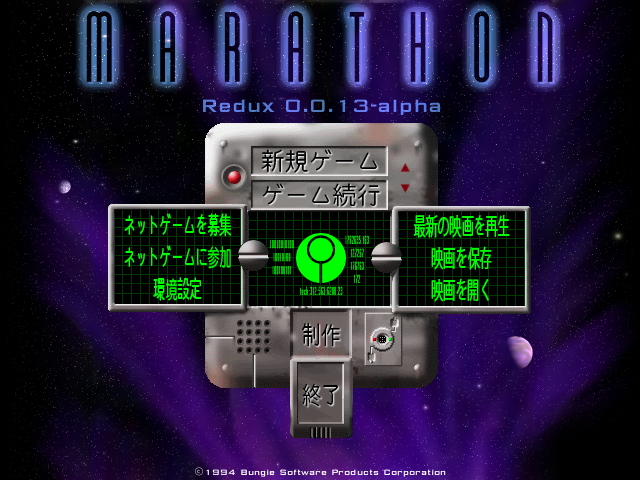
<style>
.page{position:relative;width:640px;height:480px}
.page>*{position:absolute;margin:0}
.t1{font:24px/34px "KikaiChokokuJIS-Md";color:#000000}
.t2{font:24px/34px "KozGoPr6N-Regular";color:#000000}
.t3{font:24px/32px "KikaiChokokuJIS-Md";color:#00ff00;scale:0.5 1}
.t4{font:24px/32px "KozGoPr6N-Regular";color:#00ff00;scale:0.5 1}
.t5{font:24px/32px "HGMaruGothicMPRO";color:#00ff00;scale:0.5 1}
.t6{font:24px "KikaiChokokuJIS-Md";color:#000000;scale:0.8 1}
.t7{font:24px "KozGoPr6N-Regular";color:#000000;scale:0.8 1}
</style>
<div class="page">
<p class="t1" style="left:261px;top:149px;width:119px;height:58px;text-align:center">新規ゲーム<br>ゲーム<span class="t2">続</span>行</p>
<p class="t3" style="left:124px;top:213px;width:108px;height:88px;text-align:center">ネットゲームを募<span class="t4">集<br></span>ネットゲームに<span class="t5">参加<br></span>環<span class="t5">境</span>設定</p>
<p class="t4" style="left:413px;top:215px;width:97px;height:87px;text-align:center">最新の映<span class="t3">画を再</span>生<br>映画を保存<br>映画を開く</p>
<p class="t6" style="left:302px;top:322px;width:38px;height:25px">制<span class="t7">作</span></p>
<p class="t7" style="left:302px;top:383px;width:36px;height:24px">終<span class="t6">了</span></p>
</div>
